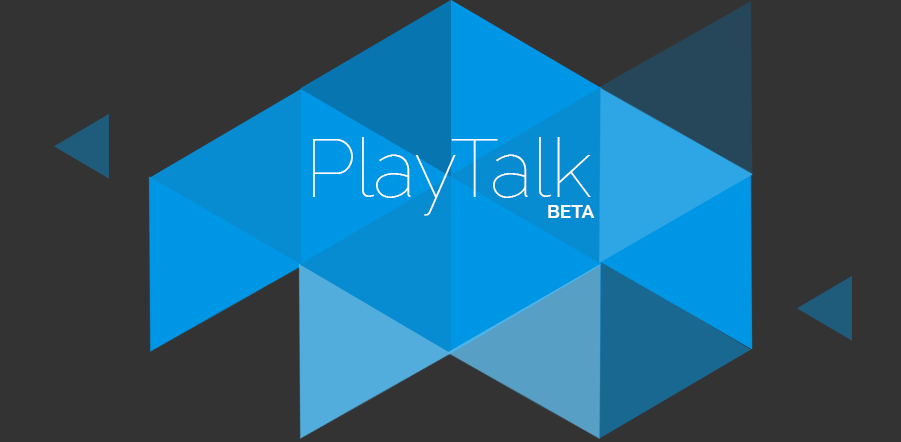
<style>
.page{position:relative;width:901px;height:442px;background:#333333}
.page>*{position:absolute;margin:0}
.t1{font:81px "Raleway-Thin";color:#ffffff}
.t2{font:18.8px "Raleway-Bold";color:#ffffff;text-transform:uppercase}
</style>
<div class="page">
<p class="t1" style="left:313px;top:137px;width:278px;height:79px">PlayTalk</p>
<p class="t2" style="left:548px;top:205px;width:47px;height:13px">beta</p>
</div>
